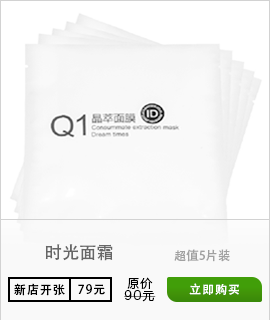
<style>
.page{position:relative;width:270px;height:320px;background:#f9f9f9}
.page>*{position:absolute;margin:0}
.t1{font:17.4px "AdobeHeitiStd-Regular";color:#676767}
.t2{font:12.2px "AdobeHeitiStd-Regular";color:#a1a1a1}
.t3{font:12.2px "HiraginoSansGB-W3";letter-spacing:0.075em;color:#000000}
.t4{font:12.2px "AdobeHeitiStd-Regular";letter-spacing:0.075em;color:#000000}
.t5{font:12.2px "AdobeHeitiStd-Regular";letter-spacing:0.075em;color:#ffffff}
</style>
<div class="page">
<p class="t1" style="left:45px;top:244px;width:68px;height:17px">时光面霜</p>
<p class="t2" style="left:174px;top:249px;width:56px;height:13px">超值5片装</p>
<p class="t3" style="left:127px;top:277px;width:26px;height:12px">原价</p>
<p class="t4" style="left:14px;top:283px;width:51px;height:13px">新店开张</p>
<p class="t4" style="left:78px;top:284px;width:27px;height:11px">79元</p>
<p class="t3" style="left:124px;top:290px;width:32px;height:12px">90元</p>
<p class="t5" style="left:189px;top:283px;width:50px;height:12px">立即购买</p>
</div>
